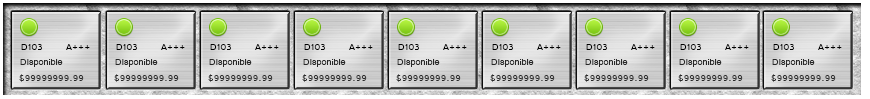
<style>
.page{position:relative;width:870px;height:99px}
.page>*{position:absolute;margin:0}
.t1{font:10px "Vrinda";color:#000000}
.t2{font:10px "Vrinda";color:#282828}
</style>
<div class="page">
<p class="t1" style="left:21px;top:44px;width:21px;height:6px">D103</p>
<p class="t1" style="left:66px;top:44px;width:24px;height:6px">A+++</p>
<p class="t1" style="left:116px;top:44px;width:21px;height:6px">D103</p>
<p class="t1" style="left:161px;top:44px;width:24px;height:6px">A+++</p>
<p class="t1" style="left:210px;top:44px;width:21px;height:6px">D103</p>
<p class="t1" style="left:255px;top:44px;width:24px;height:6px">A+++</p>
<p class="t1" style="left:304px;top:44px;width:21px;height:6px">D103</p>
<p class="t1" style="left:349px;top:44px;width:24px;height:6px">A+++</p>
<p class="t1" style="left:398px;top:44px;width:21px;height:6px">D103</p>
<p class="t1" style="left:443px;top:44px;width:24px;height:6px">A+++</p>
<p class="t1" style="left:492px;top:44px;width:21px;height:6px">D103</p>
<p class="t1" style="left:537px;top:44px;width:24px;height:6px">A+++</p>
<p class="t1" style="left:586px;top:44px;width:21px;height:6px">D103</p>
<p class="t1" style="left:631px;top:44px;width:24px;height:6px">A+++</p>
<p class="t1" style="left:680px;top:44px;width:21px;height:6px">D103</p>
<p class="t1" style="left:725px;top:44px;width:24px;height:6px">A+++</p>
<p class="t1" style="left:773px;top:44px;width:21px;height:6px">D103</p>
<p class="t1" style="left:818px;top:44px;width:24px;height:6px">A+++</p>
<p class="t2" style="left:20px;top:59px;width:43px;height:8px">DIsponible</p>
<p class="t2" style="left:115px;top:59px;width:43px;height:8px">DIsponible</p>
<p class="t2" style="left:209px;top:59px;width:43px;height:8px">DIsponible</p>
<p class="t2" style="left:303px;top:59px;width:43px;height:8px">DIsponible</p>
<p class="t2" style="left:397px;top:59px;width:43px;height:8px">DIsponible</p>
<p class="t2" style="left:491px;top:59px;width:43px;height:8px">DIsponible</p>
<p class="t2" style="left:585px;top:59px;width:43px;height:8px">DIsponible</p>
<p class="t2" style="left:679px;top:59px;width:43px;height:8px">DIsponible</p>
<p class="t2" style="left:772px;top:59px;width:43px;height:8px">DIsponible</p>
<p class="t2" style="left:19px;top:74px;width:65px;height:8px">$99999999.99</p>
<p class="t2" style="left:114px;top:74px;width:65px;height:8px">$99999999.99</p>
<p class="t2" style="left:208px;top:74px;width:65px;height:8px">$99999999.99</p>
<p class="t2" style="left:302px;top:74px;width:65px;height:8px">$99999999.99</p>
<p class="t2" style="left:396px;top:74px;width:65px;height:8px">$99999999.99</p>
<p class="t2" style="left:490px;top:74px;width:65px;height:8px">$99999999.99</p>
<p class="t2" style="left:584px;top:74px;width:65px;height:8px">$99999999.99</p>
<p class="t2" style="left:678px;top:74px;width:65px;height:8px">$99999999.99</p>
<p class="t2" style="left:771px;top:74px;width:65px;height:8px">$99999999.99</p>
</div>
